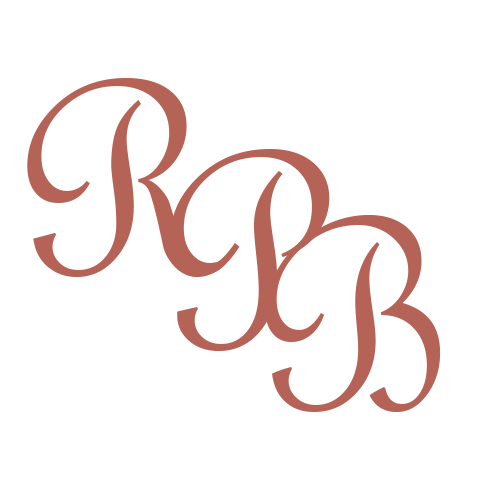
<style>
.page{position:relative;width:500px;height:500px;background:#ffffff}
.page>*{position:absolute;margin:0}
.t1{font:300px "FrenchScriptMT";color:#b56357}
</style>
<div class="page">
<p class="t1" style="left:27px;top:78px;width:213px;height:199px">R</p>
<p class="t1" style="left:170px;top:149px;width:160px;height:202px">P</p>
<p class="t1" style="left:265px;top:215px;width:176px;height:197px">B</p>
</div>
